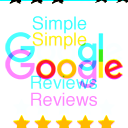
<style>
.page{position:relative;width:128px;height:128px;background:#ffffff}
.page>*{position:absolute;margin:0}
.t1{font:18px "Helvetica"}
</style>
<div class="page">
<p class="t1" style="left:32px;top:15px;width:55px;height:18px">Simple</p>
<p class="t1" style="left:31px;top:74px;width:66px;height:14px">Reviews</p>
</div>
